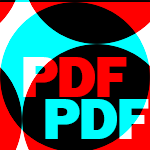
<style>
.page{position:relative;width:150px;height:150px;background:#000000}
.page>*{position:absolute;margin:0}
.t1{font:60px "FranklinGothic-Heavy";letter-spacing:-0.04em;color:#ff0000}
</style>
<div class="page">
<p class="t1" style="left:23px;top:55px;width:104px;height:40px">PDF</p>
</div>
